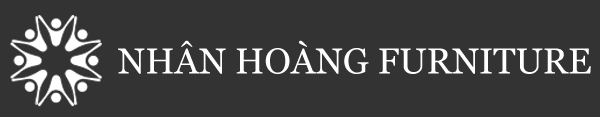
<style>
.page{position:relative;width:600px;height:117px;background:#333333}
.page>*{position:absolute;margin:0}
.t1{font:36px "Georgia";color:#ffffff}
</style>
<div class="page">
<p class="t1" style="left:118px;top:40px;width:473px;height:34px">NHÂN HOÀNG FURNITURE</p>
</div>
